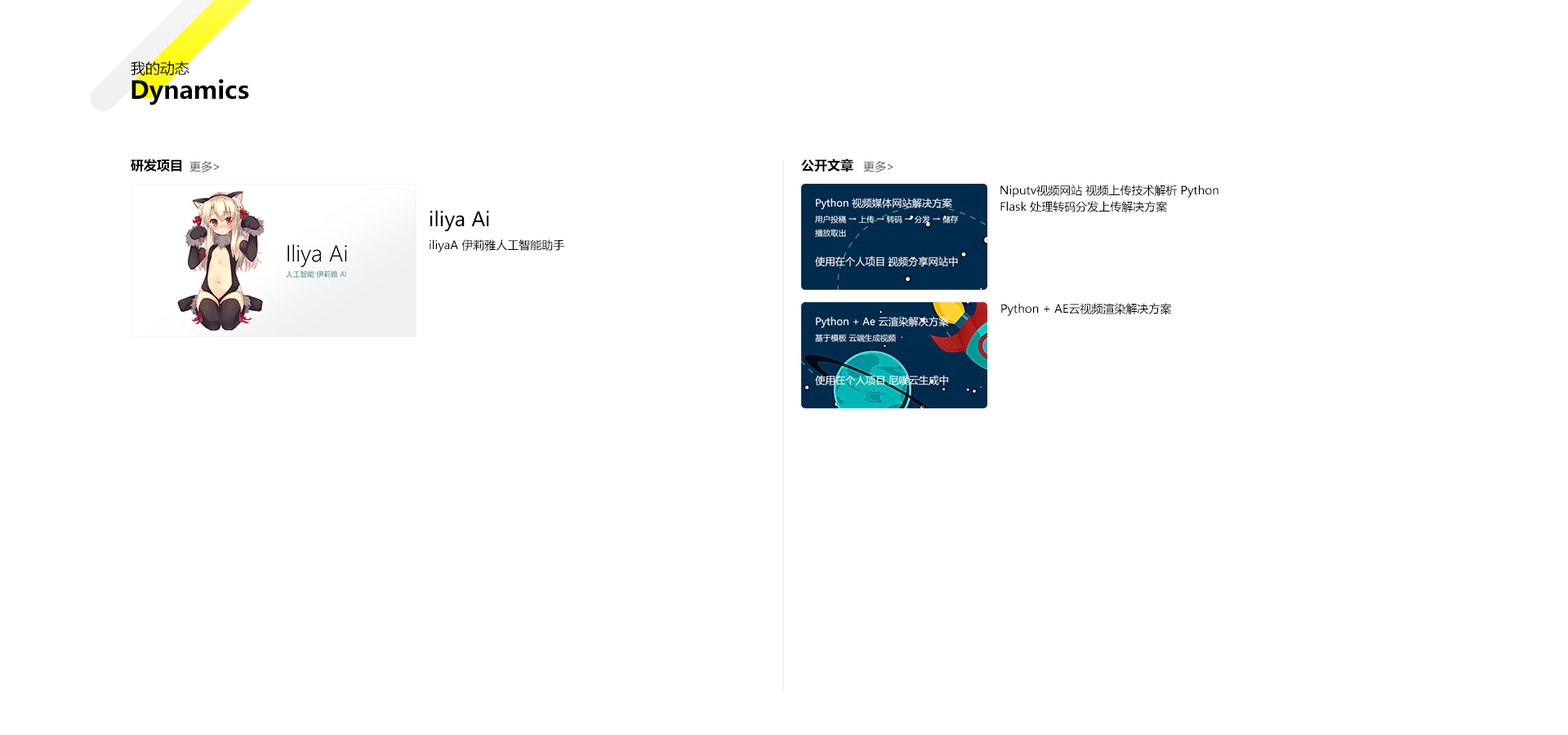
<style>
.page{position:relative;width:1568px;height:735px;background:#ffffff}
.page>*{position:absolute;margin:0}
.t1{font:14.7px "MicrosoftYaHeiUI";color:#000000}
.t2{font:24.5px "MicrosoftYaHeiUI-Bold";color:#000000}
.t3{font:13.1px "MicrosoftYaHeiUI-Bold";color:#000000}
.t4{font:11.4px "MicrosoftYaHeiUI";color:#525252}
.t5{font:11.4px/16.3px "MicrosoftYaHeiUI";color:#000000}
.t6{font:19.6px "MicrosoftYaHeiUI";color:#000000}
.t7{font:11.4px "MicrosoftYaHeiUI";color:#000000}
</style>
<div class="page">
<p class="t1" style="left:131px;top:61px;width:58px;height:15px">我的动态</p>
<p class="t2" style="left:131px;top:79px;width:118px;height:26px">Dynamics</p>
<p class="t3" style="left:131px;top:158px;width:51px;height:14px">研发项目</p>
<p class="t4" style="left:189px;top:161px;width:31px;height:11px">更多&gt;</p>
<p class="t3" style="left:801px;top:158px;width:52px;height:14px">公开文章</p>
<p class="t4" style="left:863px;top:161px;width:30px;height:11px">更多&gt;</p>
<p class="t5" style="left:1000px;top:185px;width:218px;height:27px">Niputv视频网站 视频上传技术解析 Python <br>Flask 处理转码分发上传解决方案</p>
<p class="t6" style="left:430px;top:210px;width:59px;height:22px">iliya Ai</p>
<p class="t7" style="left:430px;top:239px;width:134px;height:13px">iliyaA 伊莉雅人工智能助手</p>
<p class="t7" style="left:1001px;top:303px;width:171px;height:13px">Python + AE云视频渲染解决方案</p>
</div>
